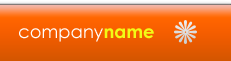
<style>
.page{position:relative;width:231px;height:61px}
.page>*{position:absolute;margin:0}
.t1{font:18px "CenturyGothic";color:#ffffff}
.t2{font:18px "CenturyGothic-Bold";color:#f2fa16}
</style>
<div class="page">
<p class="t1" style="left:19px;top:28px;width:135px;height:14px">company<span class="t2">name</span></p>
</div>
